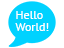
<style>
.page{position:relative;width:64px;height:48px;background:#ffffff}
.page>*{position:absolute;margin:0}
.t1{font:12px/7px "PTSans-Regular";color:#ffffff}
</style>
<div class="page">
<p class="t1" style="left:15px;top:11px;width:34px;height:20px">Hello<br>World!</p>
</div>
